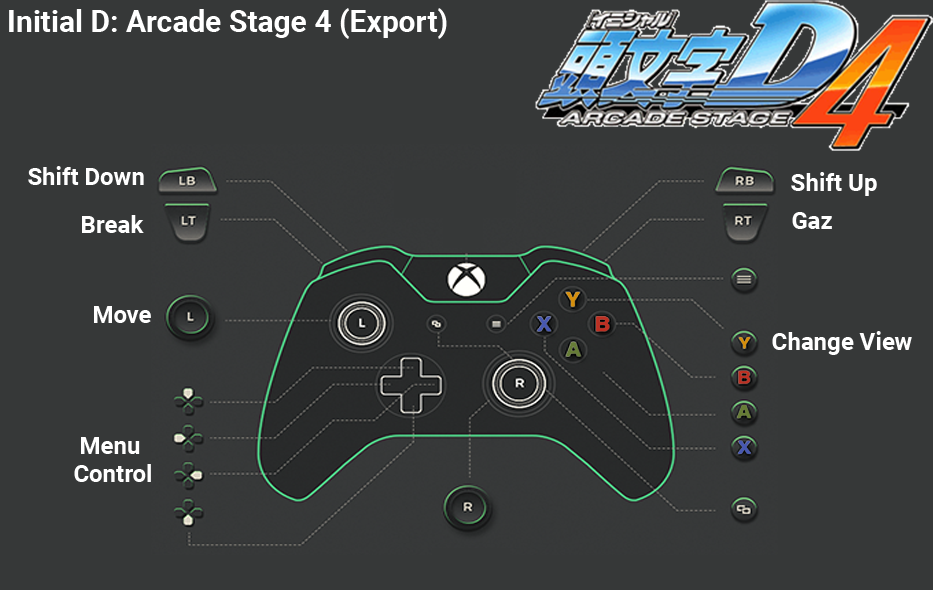
<style>
.page{position:relative;width:933px;height:590px;background:#363838}
.page>*{position:absolute;margin:0}
.t1{font:30px "Roboto-Bold";color:#ffffff}
.t2{font:24px "Roboto-Bold";color:#ffffff}
.t3{font:24px/28px "Roboto-Bold";color:#ffffff}
</style>
<div class="page">
<p class="t1" style="left:9px;top:8px;width:438px;height:31px">Initial D: Arcade Stage 4 (Export)</p>
<p class="t2" style="left:28px;top:166px;width:116px;height:19px">Shift Down</p>
<p class="t2" style="left:791px;top:172px;width:86px;height:24px">Shift Up</p>
<p class="t2" style="left:82px;top:215px;width:62px;height:18px">Break</p>
<p class="t2" style="left:792px;top:212px;width:40px;height:17px">Gaz</p>
<p class="t2" style="left:94px;top:306px;width:57px;height:17px">Move</p>
<p class="t2" style="left:772px;top:331px;width:140px;height:24px">Change View</p>
<p class="t3" style="left:74px;top:437px;width:77px;height:45px;text-align:center">Menu <br>Control</p>
</div>
